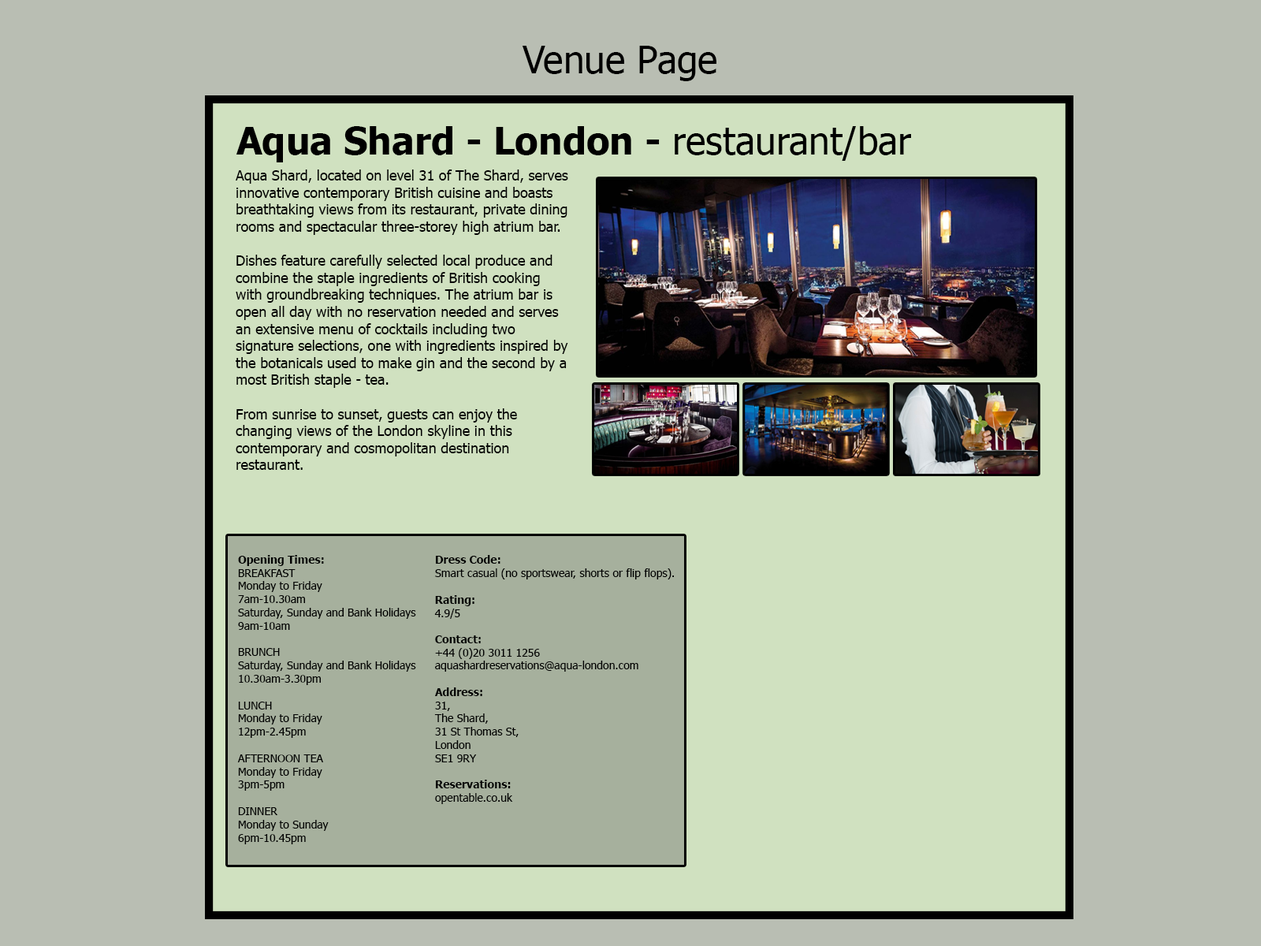
<style>
.page{position:relative;width:1261px;height:946px;background:#b9beb3}
.page>*{position:absolute;margin:0}
.t1{font:37.8px "Tahoma";color:#000000}
.t2{font:37.8px "Tahoma-Bold";color:#000000}
.t3{font:14.2px "Tahoma";color:#000000}
.t4{font:11px "Tahoma";color:#000000}
.t5{font:11px "Tahoma-Bold";color:#000000}
</style>
<div class="page">
<p class="t1" style="left:522px;top:46px;width:194px;height:35px">Venue Page</p>
<p class="t2" style="left:236px;top:126px;width:675px;height:36px">Aqua Shard - London - <span class="t1">restaurant/bar</span></p>
<p class="t3" style="left:236px;top:169px;width:332px;height:301px;text-align:right">Aqua Shard, located on level 31 of The Shard, serves innovative contemporary British cuisine and boasts breathtaking views from its restaurant, private dining rooms and spectacular three-storey high atrium bar.<br><br>Dishes feature carefully selected local produce and combine the staple ingredients of British cooking with groundbreaking techniques. The atrium bar is open all day with no reservation needed and serves an extensive menu of cocktails including two signature selections, one with ingredients inspired by the botanicals used to make gin and the second by a most British staple - tea. <br><br>From sunrise to sunset, guests can enjoy the changing views of the London skyline in this contemporary and cosmopolitan destination restaurant.</p>
<p class="t4" style="left:237px;top:555px;width:179px;height:289px;text-align:right"><span class="t5">Opening Times:<br></span>BREAKFAST<br>Monday to Friday <br>7am-10.30am<br>Saturday, Sunday and Bank Holidays <br>9am-10am<br><br>BRUNCH<br>Saturday, Sunday and Bank Holidays<br>10.30am-3.30pm<br><br>LUNCH<br>Monday to Friday <br>12pm-2.45pm<br><br>AFTERNOON TEA<br>Monday to Friday <br>3pm-5pm<br><br>DINNER<br>Monday to Sunday <br>6pm-10.45pm</p>
<p class="t4" style="left:435px;top:555px;width:239px;height:24px;text-align:right"><span class="t5">Dress Code:<br></span>Smart casual (no sportswear, shorts or flip flops).</p>
<p class="t5" style="left:434px;top:595px;width:40px;height:24px;text-align:right">Rating:<br><span class="t4">4.9/5</span></p>
<p class="t4" style="left:435px;top:635px;width:203px;height:36px;text-align:right"><span class="t5">Contact:</span> <br>+44 (0)20 3011 1256<br>aquashardreservations@aqua-london.com</p>
<p class="t4" style="left:434px;top:687px;width:85px;height:117px;text-align:right"><span class="t5">Address:</span> <br>31, <br>The Shard, <br>31 St Thomas St, <br>London <br>SE1 9RY<br><br><span class="t5">Reservations:<br></span>opentable.co.uk</p>
</div>
